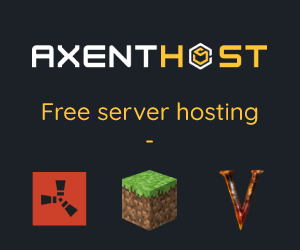
<style>
.page{position:relative;width:300px;height:250px;background:#1c2127}
.page>*{position:absolute;margin:0}
.t1{font:24px "Quicksand-Medium";color:#fec538}
</style>
<div class="page">
<p class="t1" style="left:42px;top:102px;width:216px;height:41px">Free server hosting<br>                                 -</p>
</div>
